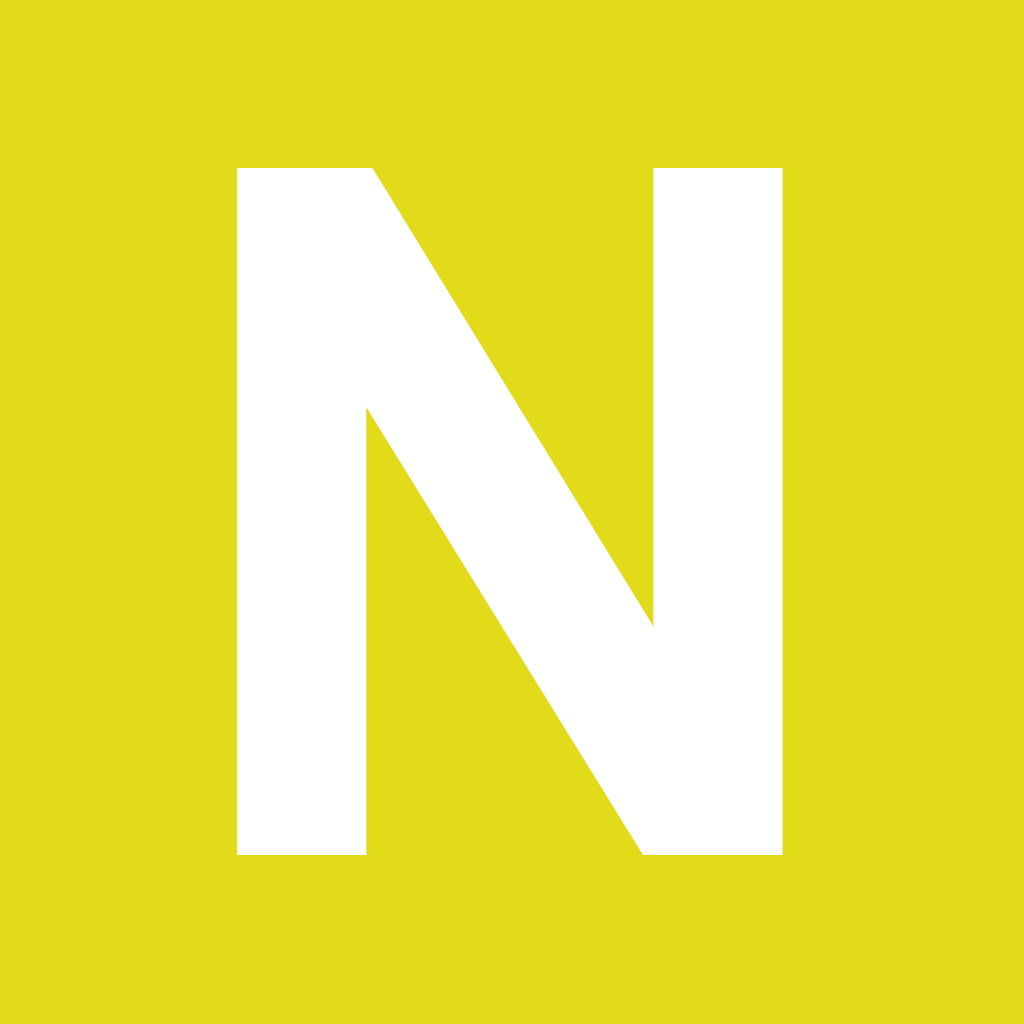
<style>
.page{position:relative;width:1024px;height:1024px;background:#e2db19}
.page>*{position:absolute;margin:0}
.t1{font:960px "Arial-BoldMT";color:#ffffff}
</style>
<div class="page">
<p class="t1" style="left:237px;top:168px;width:546px;height:687px">N</p>
</div>
